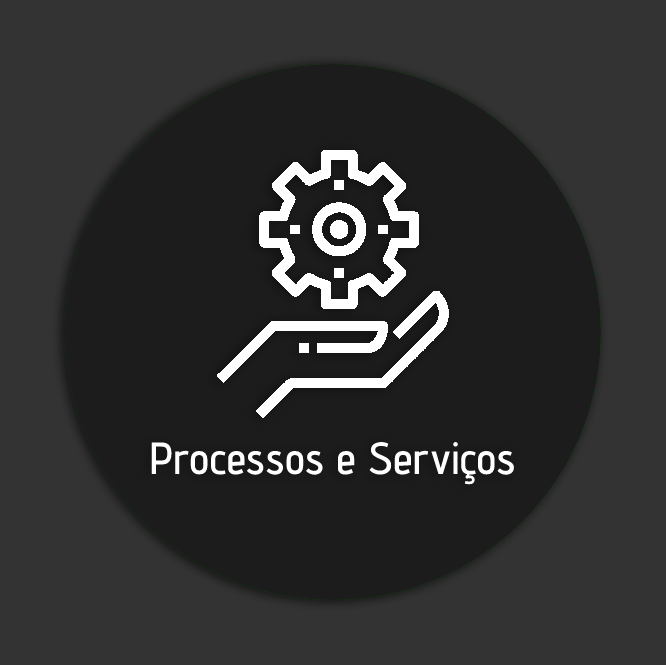
<style>
.page{position:relative;width:666px;height:665px;background:#333333}
.page>*{position:absolute;margin:0}
.t1{font:45px "AdventPro-SemiBold";color:#ffffff}
</style>
<div class="page">
<p class="t1" style="left:151px;top:442px;width:363px;height:43px">Processos e Serviços</p>
</div>
